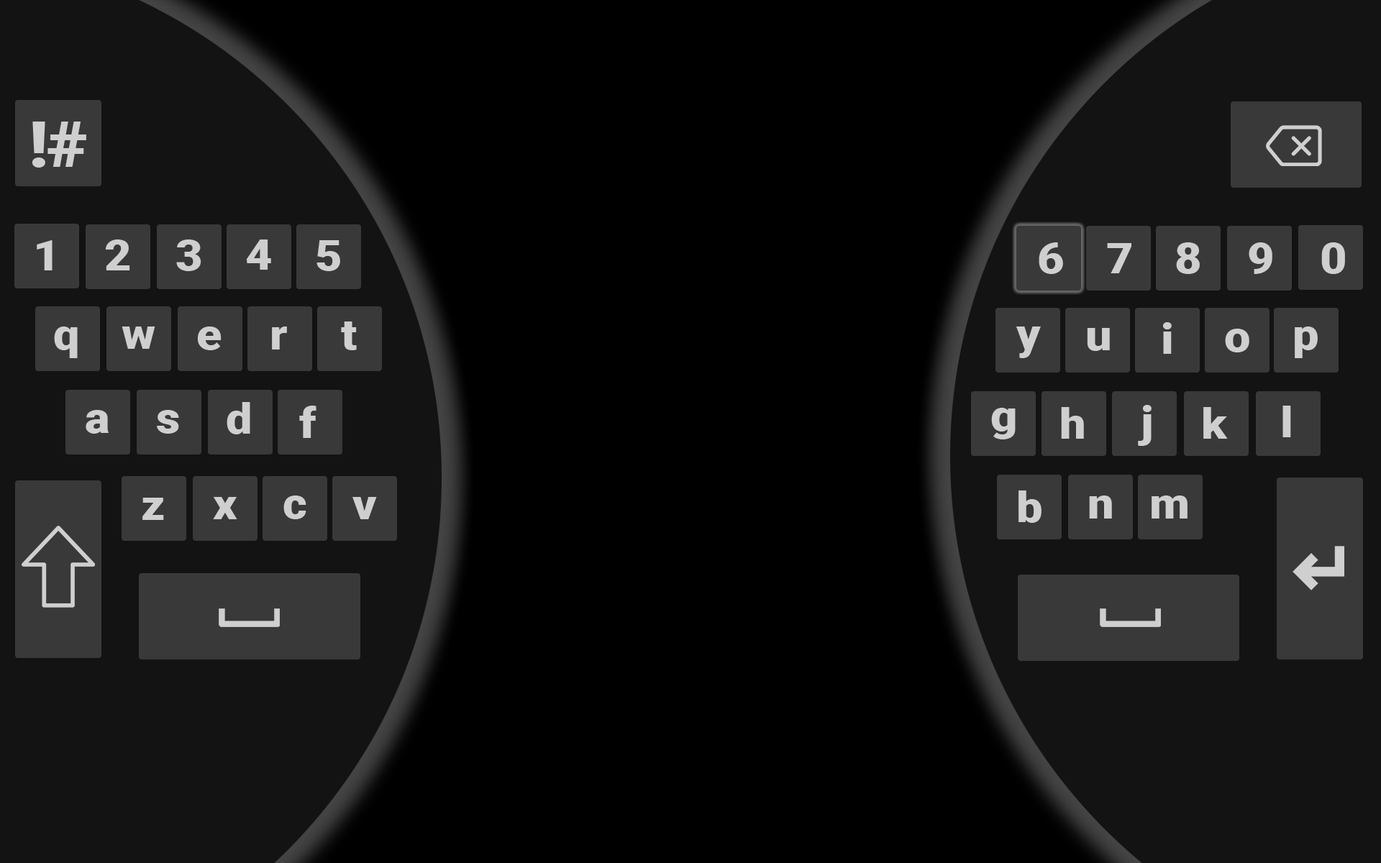
<style>
.page{position:relative;width:1381px;height:863px;background:#000000}
.page>*{position:absolute;margin:0}
.t1{font:64px "Roboto-Black";letter-spacing:-0.02em;color:#cfcfcf;scale:1.1 1}
.t2{font:42.7px "Roboto-Black";letter-spacing:-0.02em;color:#cfcfcf;scale:1.1 1}
</style>
<div class="page">
<p class="t1" style="left:32px;top:122px;width:54px;height:46px">!#</p>
<p class="t2" style="left:37px;top:240px;width:16px;height:30px">1</p>
<p class="t2" style="left:105px;top:240px;width:25px;height:30px">2</p>
<p class="t2" style="left:176px;top:240px;width:25px;height:31px">3</p>
<p class="t2" style="left:246px;top:240px;width:25px;height:30px">4</p>
<p class="t2" style="left:317px;top:240px;width:23px;height:31px">5</p>
<p class="t2" style="left:1039px;top:242px;width:24px;height:32px">6</p>
<p class="t2" style="left:1107px;top:243px;width:25px;height:30px">7</p>
<p class="t2" style="left:1176px;top:242px;width:24px;height:32px">8</p>
<p class="t2" style="left:1249px;top:242px;width:24px;height:32px">9</p>
<p class="t2" style="left:1322px;top:242px;width:23px;height:32px">0</p>
<p class="t2" style="left:54px;top:327px;width:24px;height:31px">q</p>
<p class="t2" style="left:122px;top:327px;width:33px;height:22px">w</p>
<p class="t2" style="left:197px;top:327px;width:25px;height:23px">e</p>
<p class="t2" style="left:272px;top:327px;width:15px;height:23px">r</p>
<p class="t2" style="left:341px;top:322px;width:16px;height:28px">t</p>
<p class="t2" style="left:1016px;top:327px;width:25px;height:31px">y</p>
<p class="t2" style="left:1087px;top:328px;width:23px;height:23px">u</p>
<p class="t2" style="left:1163px;top:322px;width:9px;height:32px">i</p>
<p class="t2" style="left:1225px;top:329px;width:25px;height:24px">o</p>
<p class="t2" style="left:1295px;top:327px;width:23px;height:31px">p</p>
<p class="t2" style="left:86px;top:410px;width:23px;height:24px">a</p>
<p class="t2" style="left:157px;top:410px;width:22px;height:24px">s</p>
<p class="t2" style="left:227px;top:402px;width:23px;height:33px">d</p>
<p class="t2" style="left:299px;top:406px;width:18px;height:32px">f</p>
<p class="t2" style="left:991px;top:408px;width:25px;height:32px">g</p>
<p class="t2" style="left:1061px;top:407px;width:23px;height:32px">h</p>
<p class="t2" style="left:1138px;top:405px;width:14px;height:41px">j</p>
<p class="t2" style="left:1204px;top:407px;width:24px;height:32px">k</p>
<p class="t2" style="left:1283px;top:406px;width:8px;height:31px">l</p>
<p class="t2" style="left:142px;top:498px;width:22px;height:22px">z</p>
<p class="t2" style="left:213px;top:497px;width:24px;height:22px">x</p>
<p class="t2" style="left:283px;top:496px;width:23px;height:23px">c</p>
<p class="t2" style="left:353px;top:497px;width:24px;height:22px">v</p>
<p class="t2" style="left:1019px;top:491px;width:23px;height:32px">b</p>
<p class="t2" style="left:1089px;top:496px;width:23px;height:23px">n</p>
<p class="t2" style="left:1152px;top:496px;width:36px;height:23px">m</p>
</div>
